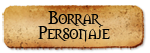
<style>
.page{position:relative;width:150px;height:53px}
.page>*{position:absolute;margin:0}
.t1{font:17px/15.6px "Morpheus";color:#000000}
</style>
<div class="page">
<p class="t1" style="left:38px;top:11px;width:72px;height:31px;text-align:center">Borrar<br>Personaje</p>
</div>
